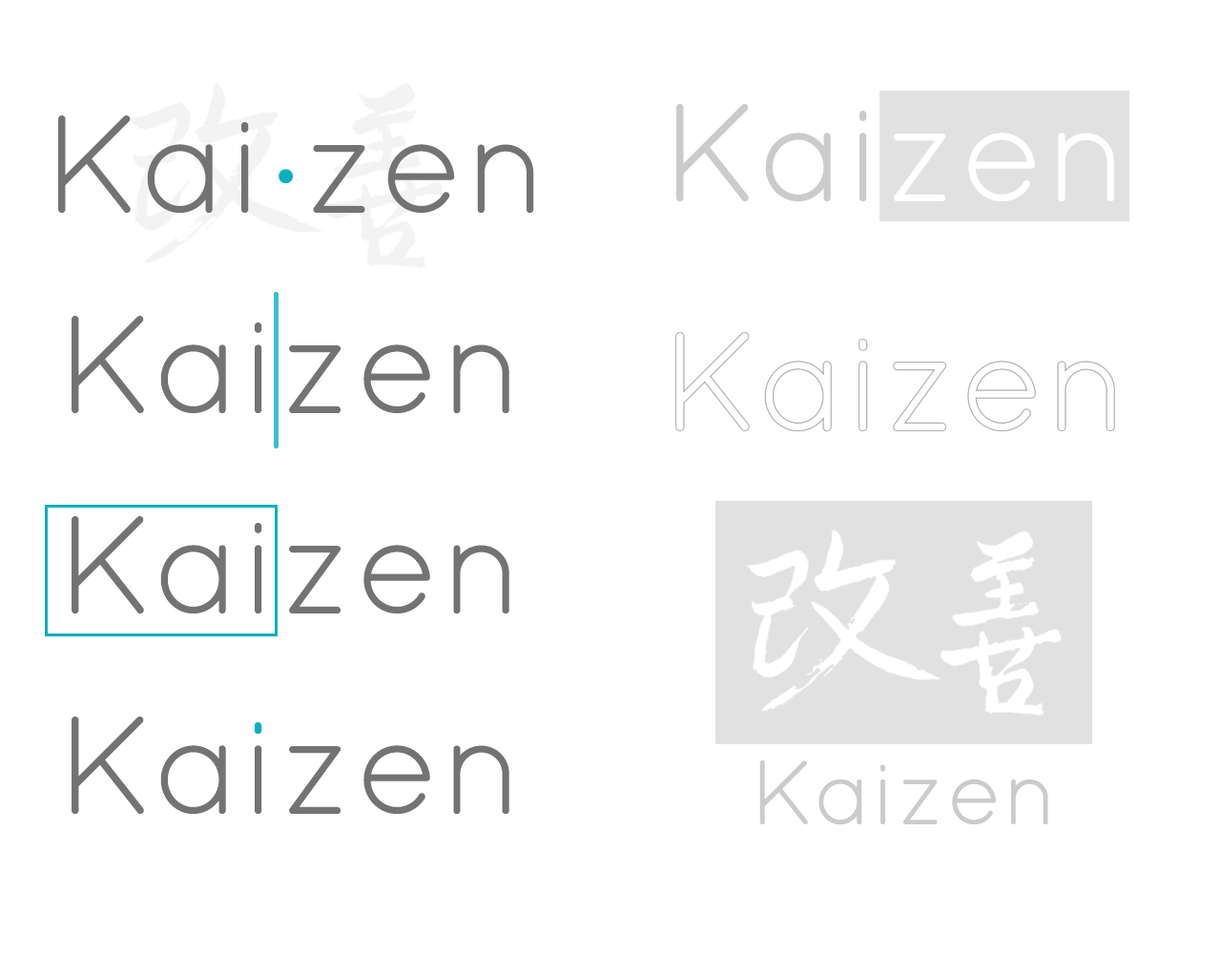
<style>
.page{position:relative;width:1221px;height:977px;background:#ffffff}
.page>*{position:absolute;margin:0}
.t1{font:139.3px "Quicksand-Regular";color:#737373}
.t2{font:139.3px "Quicksand-Regular";letter-spacing:0.04em;color:#07b1bc}
.t3{font:91.6px "Quicksand-Regular";color:#cbcbcb}
</style>
<div class="page">
<p class="t1" style="left:58px;top:115px;width:476px;height:98px">Kai<span class="t2">.</span>zen</p>
<p class="t1" style="left:72px;top:316px;width:437px;height:97px">Kaizen</p>
<p class="t1" style="left:72px;top:516px;width:437px;height:97px">Kaizen</p>
<p class="t1" style="left:72px;top:716px;width:437px;height:98px">Kaizen</p>
<p class="t3" style="left:759px;top:759px;width:289px;height:65px">Kaizen</p>
</div>
